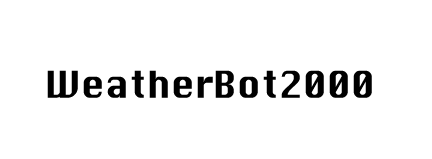
<style>
.page{position:relative;width:432px;height:159px;background:#ffffff}
.page>*{position:absolute;margin:0}
.t1{font:36px "Krungthep";color:#000000}
</style>
<div class="page">
<p class="t1" style="left:47px;top:70px;width:325px;height:28px">WeatherBot2000</p>
</div>
